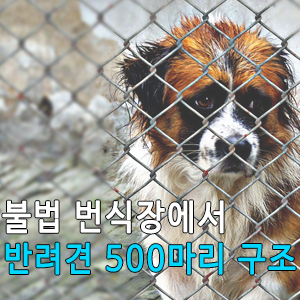
<style>
.page{position:relative;width:300px;height:300px}
.page>*{position:absolute;margin:0}
.t1{font:34.6px "NanumBarunGothicOTF";letter-spacing:0.075em;color:#ffffff;font-weight:bold;scale:0.9 1}
.t2{font:33.7px "NanumBarunGothicOTF";letter-spacing:0.075em;color:#01d8ff;font-weight:bold;scale:0.9 1}
</style>
<div class="page">
<p class="t1" style="left:2px;top:200px;width:222px;height:34px">불법 번식장에서</p>
<p class="t2" style="left:5px;top:242px;width:291px;height:33px">반려견 500마리 구조</p>
</div>
